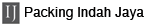
<style>
.page{position:relative;width:150px;height:25px;background:#ffffff}
.page>*{position:absolute;margin:0}
.t1{font:14px "FreeSans";color:#010000}
</style>
<div class="page">
<p class="t1" style="left:25px;top:7px;width:119px;height:13px">Packing Indah Jaya</p>
</div>
